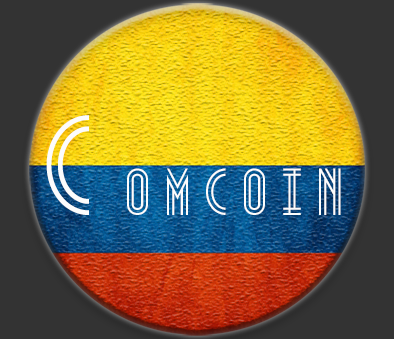
<style>
.page{position:relative;width:394px;height:339px;background:#333333}
.page>*{position:absolute;margin:0}
.t1{font:58.3px "Metropolis1920";letter-spacing:0.2em;color:#fcfcfc}
.t2{font:125px "Metropolis1920";letter-spacing:0.2em;color:#fcfcfc}
</style>
<div class="page">
<p class="t1" style="left:46px;top:115px;width:295px;height:100px"><span class="t2"> C</span>OMCOIN</p>
</div>
